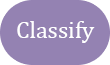
<style>
.page{position:relative;width:110px;height:65px;background:#9482b2}
.page>*{position:absolute;margin:0}
.t1{font:24px "Cambria";color:#ffffff}
</style>
<div class="page">
<p class="t1" style="left:17px;top:21px;width:78px;height:22px">Classify</p>
</div>
